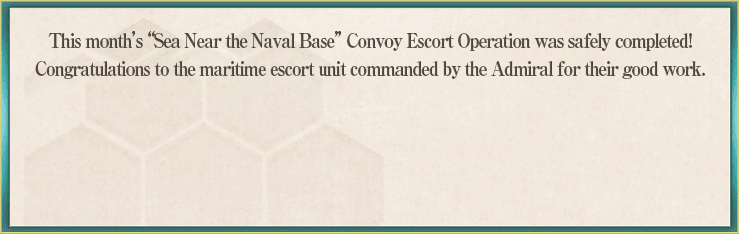
<style>
.page{position:relative;width:739px;height:235px}
.page>*{position:absolute;margin:0}
.t1{font:20px/28px "RyuminPro-ExBold";letter-spacing:-0.08em;color:#64594f;scale:0.9 1}
</style>
<div class="page">
<p class="t1" style="left:35px;top:31px;width:670px;height:48px;text-align:center">This month’s “Sea Near the Naval Base” Convoy Escort Operation was safely completed!<br>Congratulations to the maritime escort unit commanded by the Admiral for their good work.</p>
</div>
